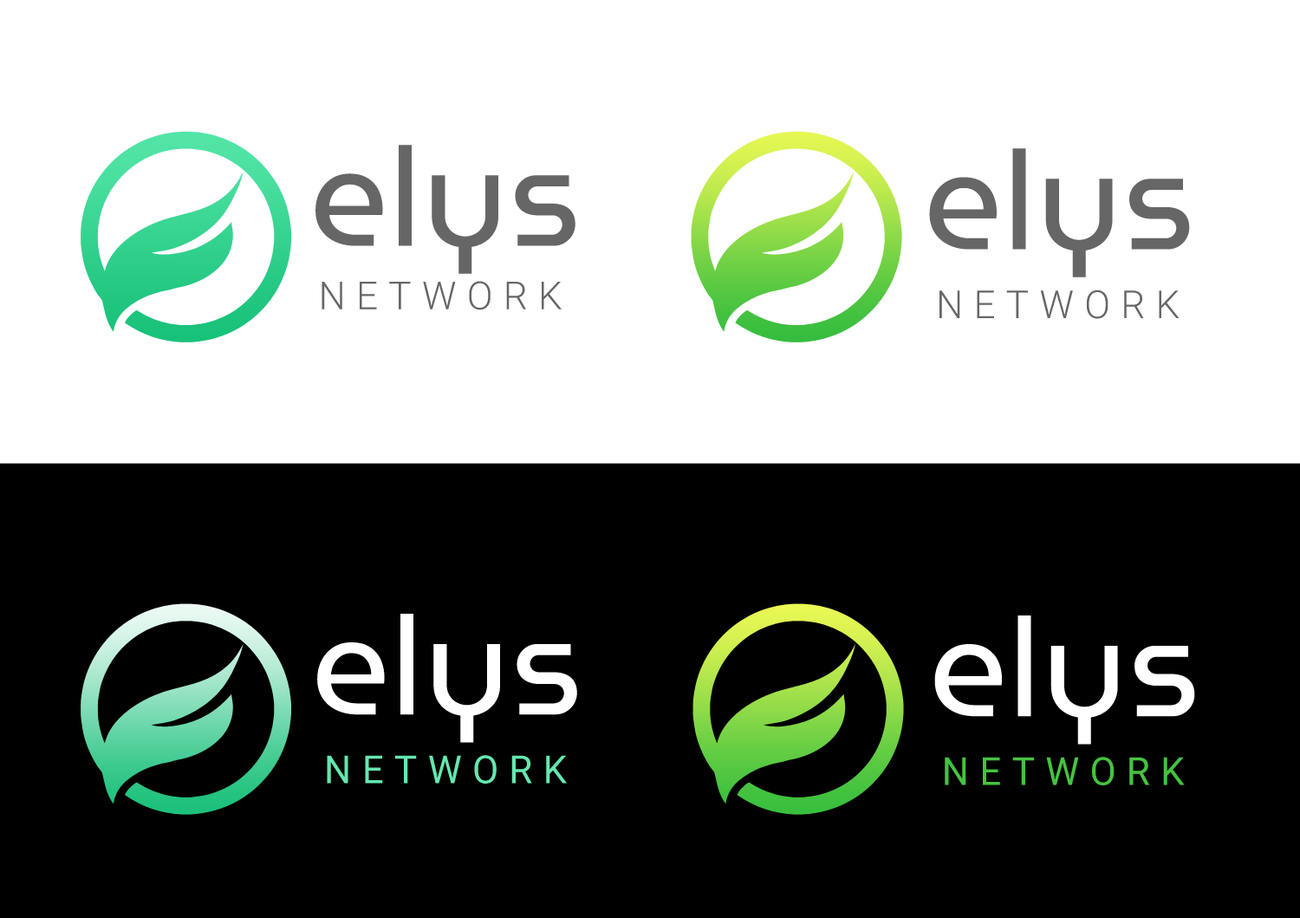
<style>
.page{position:relative;width:1300px;height:918px;background:#ffffff}
.page>*{position:absolute;margin:0}
.t1{font:137.7px "MuseoModerno-Regular";color:#666666}
.t2{font:38.7px "Roboto-Light";letter-spacing:0.28em;color:#666666}
.t3{font:137.7px "MuseoModerno-Regular";color:#ffffff}
.t4{font:38.7px "Roboto-Regular";letter-spacing:0.28em;color:#65e7af}
.t5{font:38.7px "Roboto-Regular";letter-spacing:0.28em;color:#45c340}
</style>
<div class="page">
<p class="t1" style="left:315px;top:145px;width:260px;height:129px">elys</p>
<p class="t1" style="left:929px;top:148px;width:261px;height:129px">elys</p>
<p class="t2" style="left:321px;top:281px;width:240px;height:29px">NETWORK</p>
<p class="t2" style="left:939px;top:289px;width:240px;height:30px">NETWORK</p>
<p class="t3" style="left:317px;top:613px;width:260px;height:130px">elys</p>
<p class="t3" style="left:934px;top:615px;width:261px;height:129px">elys</p>
<p class="t4" style="left:327px;top:755px;width:240px;height:28px">NETWORK</p>
<p class="t5" style="left:944px;top:756px;width:240px;height:29px">NETWORK</p>
</div>
